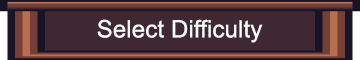
<style>
.page{position:relative;width:360px;height:60px;background:#3f2832}
.page>*{position:absolute;margin:0}
.t1{font:24px "ArialMT";letter-spacing:0.005em;color:#ffffff}
</style>
<div class="page">
<p class="t1" style="left:97px;top:19px;width:166px;height:24px">Select Difficulty</p>
</div>
